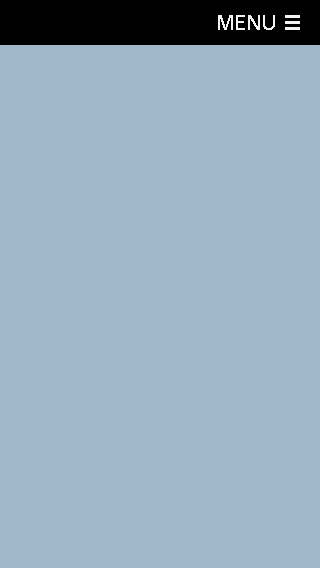
<style>
.page{position:relative;width:320px;height:568px;background:#a1b8ca}
.page>*{position:absolute;margin:0}
.t1{font:21px "OpenSans-Semibold";letter-spacing:-0.02em;color:#f3f3f3}
</style>
<div class="page">
<p class="t1" style="left:218px;top:15px;width:57px;height:15px">MENU</p>
</div>
